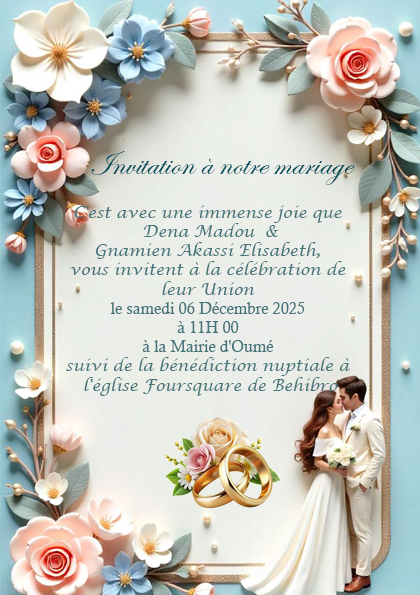
<style>
.page{position:relative;width:420px;height:595px}
.page>*{position:absolute;margin:0}
.t1{font:35px "EdwardianScriptITC";color:#024e5c}
.t2{font:16px "LucidaCalligraphy-Italic";color:#46737a}
.t3{font:16px "CalistoMT";color:#46737a}
</style>
<div class="page">
<p class="t1" style="left:91px;top:151px;width:264px;height:34px">Invitation à notre mariage</p>
<p class="t2" style="left:66px;top:205px;width:284px;height:191px;text-align:center">C'est avec une immense joie que <br>Dena Madou  &amp;<br>Gnamien Akassi Elisabeth, <br>vous invitent à la célébration de <br>leur Union <br><span class="t3">le samedi 06 Décembre 2025 <br>à 11H 00 <br>à la Mairie d'Oumé <br></span>suivi de la bénédiction nuptiale à <br>l'église Foursquare de Behibro</p>
</div>
